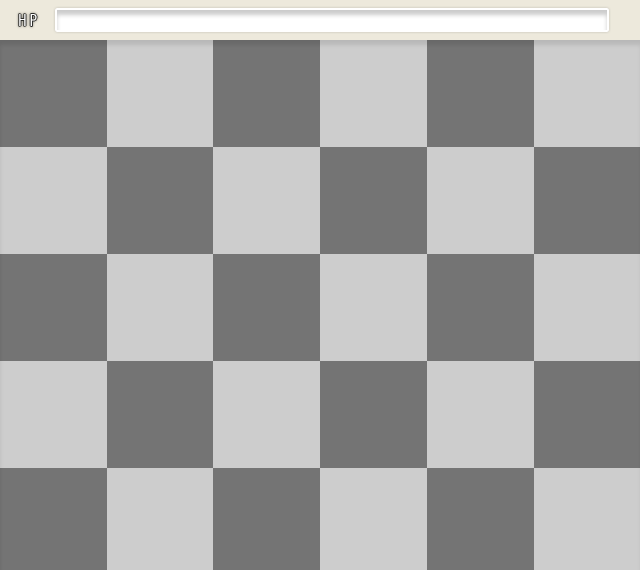
<style>
.page{position:relative;width:640px;height:570px;background:#747474}
.page>*{position:absolute;margin:0}
.t1{font:18px "OratorStd";color:#ffffff}
</style>
<div class="page">
<p class="t1" style="left:19px;top:14px;width:18px;height:12px">HP</p>
</div>
